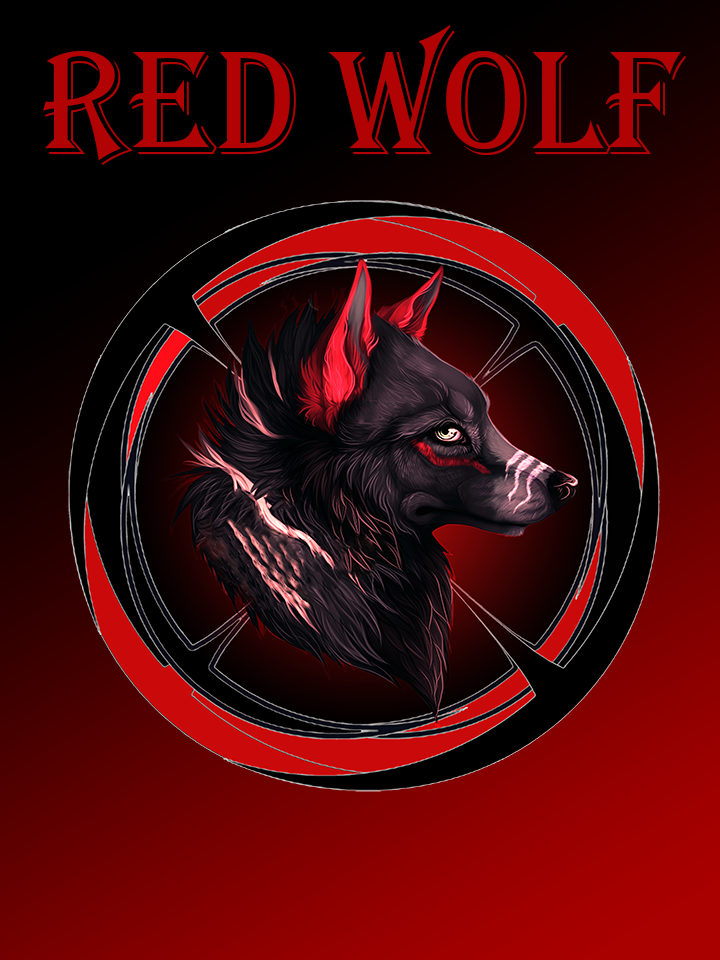
<style>
.page{position:relative;width:720px;height:960px}
.page>*{position:absolute;margin:0}
.t1{font:153.1px "Algerian";color:#b10303;scale:0.91 1}
</style>
<div class="page">
<p class="t1" style="left:43px;top:25px;width:643px;height:140px">Red Wolf</p>
</div>
